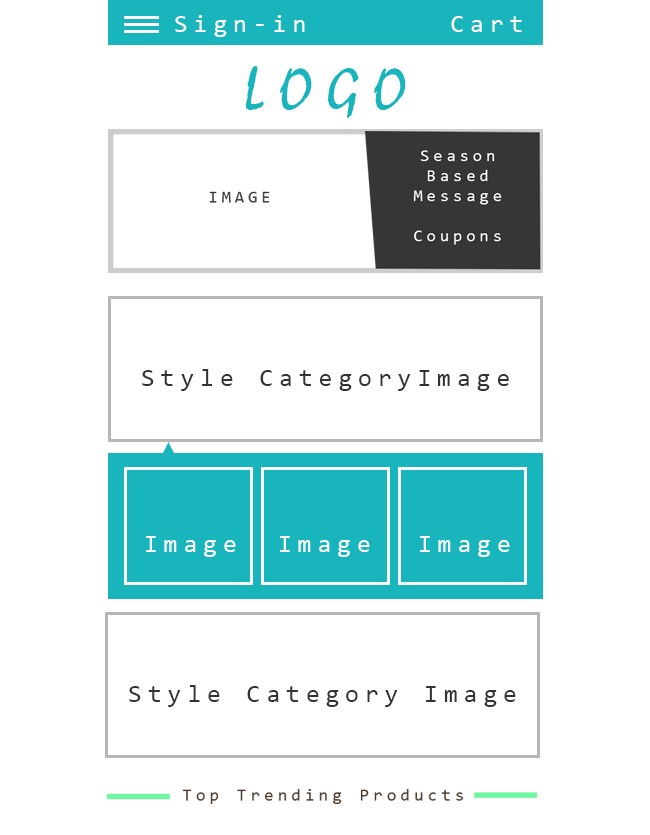
<style>
.page{position:relative;width:650px;height:835px;background:#ffffff}
.page>*{position:absolute;margin:0}
.t1{font:25px "Consolas";letter-spacing:0.24em;color:#fcfcfc}
.t2{font:62.5px "Mistral";letter-spacing:0.24em;color:#19b5bc}
.t3{font:25px "Consolas";letter-spacing:0.24em;color:#333333}
</style>
<div class="page">
<p class="t1" style="left:175px;top:15px;width:347px;height:22px">Sign-in       Cart</p>
<p class="t2" style="left:246px;top:66px;width:160px;height:52px">LOGO</p>
<p class="t3" style="left:142px;top:369px;width:367px;height:22px">Style CategoryImage</p>
<p class="t1" style="left:146px;top:536px;width:90px;height:21px">Image</p>
<p class="t1" style="left:280px;top:536px;width:90px;height:21px">Image</p>
<p class="t1" style="left:420px;top:536px;width:90px;height:21px">Image</p>
<p class="t3" style="left:129px;top:685px;width:387px;height:22px">Style Category Image</p>
</div>
